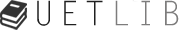
<style>
.page{position:relative;width:194px;height:30px;background:#ffffff}
.page>*{position:absolute;margin:0}
.t1{font:34px "VnLetterGothic";letter-spacing:0.15em;color:#1f1f1f}
.t2{font:34px "VnLetterGothic";letter-spacing:0.15em;color:#7d7c7c}
.t3{font:34px "VnLetterGothic";letter-spacing:0.15em;color:#444343}
</style>
<div class="page">
<p class="t1" style="left:37px;top:0px;width:142px;height:26px">UET<span class="t2">LIB</span><span class="t3">B</span></p>
</div>
